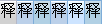
<style>
.page{position:relative;width:102px;height:24px}
.page>*{position:absolute;margin:0}
.t1{font:16.7px "NSimSun";color:#020202}
</style>
<div class="page">
<p class="t1" style="left:1px;top:3px;width:14px;height:15px">释</p>
<p class="t1" style="left:18px;top:3px;width:14px;height:15px">释</p>
<p class="t1" style="left:35px;top:3px;width:14px;height:15px">释</p>
<p class="t1" style="left:52px;top:3px;width:14px;height:15px">释</p>
<p class="t1" style="left:69px;top:3px;width:14px;height:15px">释</p>
<p class="t1" style="left:86px;top:3px;width:14px;height:15px">释</p>
</div>
